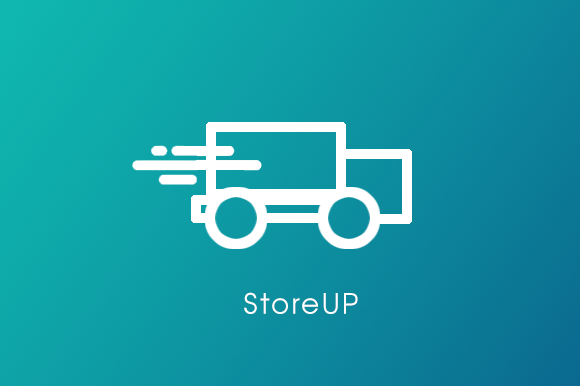
<style>
.page{position:relative;width:580px;height:386px}
.page>*{position:absolute;margin:0}
.t1{font:28px "TeXGyreAdventor-Regular";letter-spacing:0.075em;color:#ffffff}
</style>
<div class="page">
<p class="t1" style="left:244px;top:292px;width:114px;height:22px">StoreUP</p>
</div>
